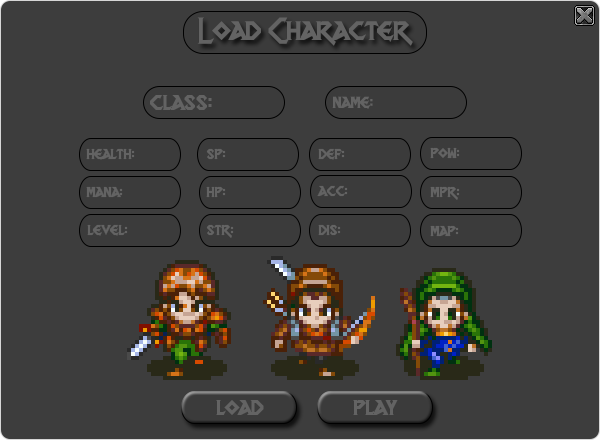
<style>
.page{position:relative;width:600px;height:440px;background:#3d3d3d}
.page>*{position:absolute;margin:0}
.t1{font:30px "DragonSlapper";color:#636363}
.t2{font:24px "DragonSlapper";color:#636363}
.t3{font:18px "DragonSlapper";color:#636363}
.t4{font:16px "DragonSlapper";color:#636363}
</style>
<div class="page">
<p class="t1" style="left:197px;top:17px;width:216px;height:29px">Load Character</p>
<p class="t2" style="left:150px;top:95px;width:62px;height:15px">class:</p>
<p class="t3" style="left:332px;top:96px;width:41px;height:13px">name:</p>
<p class="t4" style="left:86px;top:148px;width:49px;height:12px">health:</p>
<p class="t4" style="left:206px;top:148px;width:20px;height:12px">sp:</p>
<p class="t4" style="left:318px;top:148px;width:27px;height:12px">def:</p>
<p class="t4" style="left:430px;top:147px;width:30px;height:12px">pow:</p>
<p class="t4" style="left:317px;top:185px;width:31px;height:12px">acc:</p>
<p class="t4" style="left:86px;top:186px;width:37px;height:12px">mana:</p>
<p class="t4" style="left:206px;top:186px;width:20px;height:12px">hp:</p>
<p class="t4" style="left:430px;top:186px;width:30px;height:14px">mpr:</p>
<p class="t4" style="left:87px;top:224px;width:41px;height:12px">level:</p>
<p class="t4" style="left:206px;top:224px;width:28px;height:14px">str:</p>
<p class="t4" style="left:318px;top:224px;width:23px;height:12px">dis:</p>
<p class="t4" style="left:430px;top:225px;width:29px;height:12px">map:</p>
<p class="t2" style="left:216px;top:400px;width:48px;height:15px">load</p>
<p class="t2" style="left:353px;top:400px;width:45px;height:15px">play</p>
</div>
